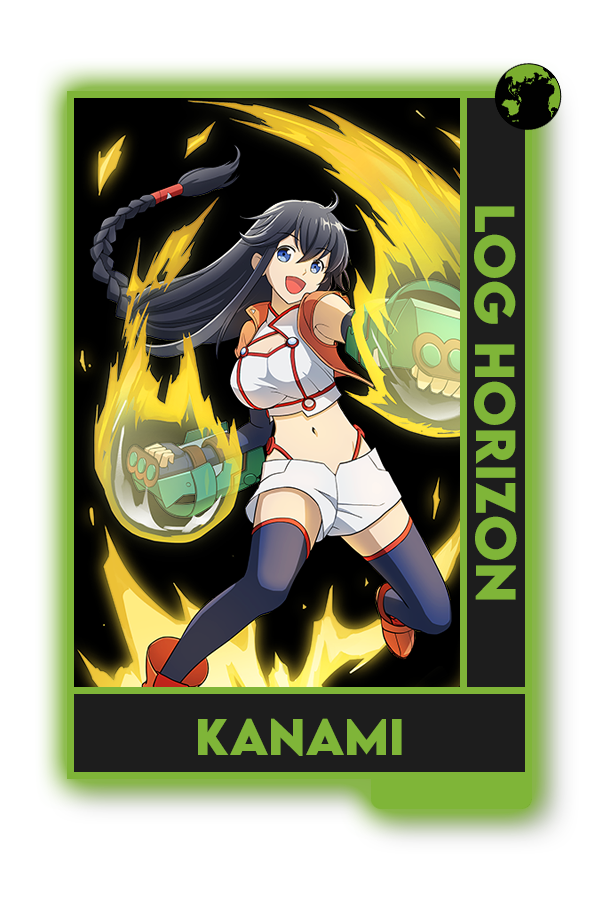
<style>
.page{position:relative;width:600px;height:900px;background:#ffffff}
.page>*{position:absolute;margin:0}
.t1{font:50px "LEMONMILK-Bold";color:#7fad41}
.t2{font:45.8px "LEMONMILK-Bold";color:#7fad41}
</style>
<div class="page">
<p class="t1" style="left:474px;top:206px;width:43px;height:394px;rotate:90deg">Log Horizon</p>
<p class="t2" style="left:198px;top:718px;width:204px;height:38px">Kanami</p>
</div>
